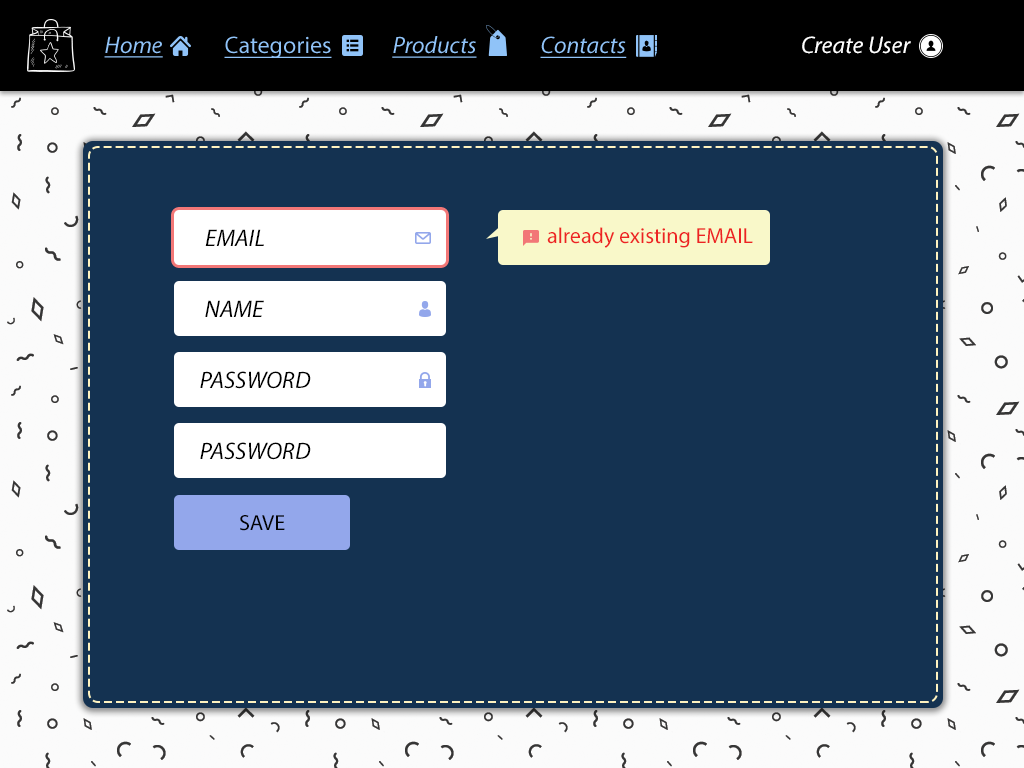
<style>
.page{position:relative;width:1024px;height:768px;background:#143251}
.page>*{position:absolute;margin:0}
.t1{font:24px "MyriadPro-It";color:#90c3f8;text-decoration:underline}
.t2{font:24px "MyriadPro-Regular";color:#90c3f8;text-decoration:underline}
.t3{font:24px "MyriadPro-It";color:#ffffff}
.t4{font:24px "MyriadPro-It";color:#000000}
.t5{font:22px "MyriadPro-Regular";color:#ed2323}
.t6{font:22px "MyriadPro-Regular";color:#020202;text-transform:uppercase}
</style>
<div class="page">
<p class="t1" style="left:104px;top:36px;width:59px;height:22px">Home</p>
<p class="t2" style="left:224px;top:36px;width:108px;height:22px">Categories</p>
<p class="t1" style="left:392px;top:36px;width:85px;height:22px">Products</p>
<p class="t1" style="left:540px;top:36px;width:87px;height:22px">Contacts</p>
<p class="t3" style="left:802px;top:36px;width:109px;height:18px">Create User</p>
<p class="t4" style="left:205px;top:229px;width:59px;height:17px">EMAIL</p>
<p class="t5" style="left:547px;top:227px;width:206px;height:21px">already existing EMAIL</p>
<p class="t4" style="left:205px;top:300px;width:59px;height:17px">NAME</p>
<p class="t4" style="left:200px;top:371px;width:111px;height:18px">PASSWORD</p>
<p class="t4" style="left:200px;top:442px;width:111px;height:18px">PASSWORD</p>
<p class="t6" style="left:240px;top:515px;width:45px;height:16px">save</p>
</div>
